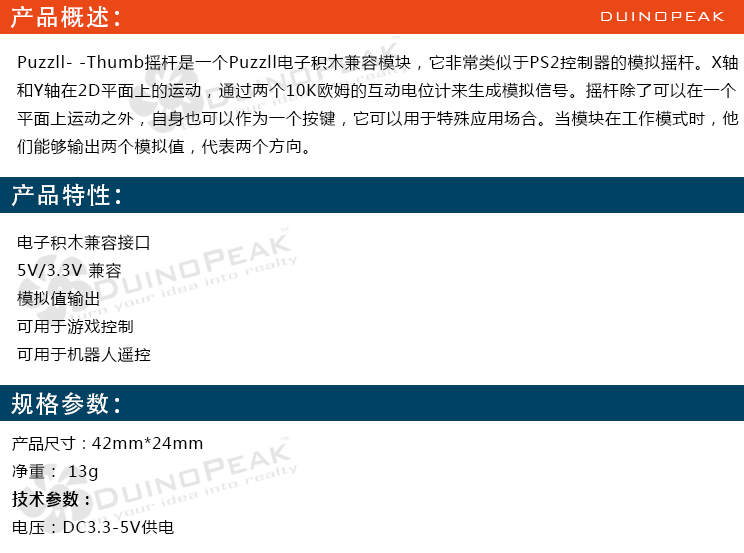
<style>
.page{position:relative;width:744px;height:553px;background:#ffffff}
.page>*{position:absolute;margin:0}
.t1{font:24px "AdobeHeitiStd-Regular";letter-spacing:0.05em;color:#ffffff}
.t2{font:18px "BankGothicBT-Light";letter-spacing:0.05em;color:#ffffff}
.t3{font:16px "MicrosoftYaHei";letter-spacing:0.05em;color:#000000}
.t4{font:16px "MicrosoftYaHei";color:#000000}
.t5{font:16px "MicrosoftYaHei-Bold";letter-spacing:0.05em;color:#000000}
</style>
<div class="page">
<p class="t1" style="left:10px;top:6px;width:109px;height:23px">产品概述：</p>
<p class="t2" style="left:601px;top:12px;width:124px;height:9px">DUINOPEAK</p>
<p class="t3" style="left:17px;top:54px;width:722px;height:101px">Puzzll- -Thumb摇杆是一个Puzzll电子积木兼容模块，它非常类似于PS2控制器的模拟摇杆。X轴<br>和Y轴在2D平面上的运动，通过两个10K欧姆的互动电位计来生成模拟信号。摇杆除了可以在一个<br>平面上运动之外，自身也可以作为一个按键，它可以用于特殊应用场合。当模块在工作模式时，他<br>们能够输出两个模拟值，代表两个方向。</p>
<p class="t1" style="left:11px;top:183px;width:109px;height:24px">产品特性：</p>
<p class="t3" style="left:17px;top:234px;width:134px;height:128px">电子积木兼容接口<br>5V/3.3V 兼容<br>模拟值输出<br>可用于游戏控制<br>可用于机器人遥控</p>
<p class="t1" style="left:11px;top:392px;width:108px;height:23px">规格参数：</p>
<p class="t3" style="left:12px;top:436px;width:191px;height:99px"><span class="t4">产品尺寸：</span>42mm*24mm<br>净重： 13g<br><span class="t5">技术参数：<br></span>电压：DC3.3-5V供电</p>
</div>
